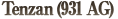
<style>
.page{position:relative;width:118px;height:19px;background:#ffffff}
.page>*{position:absolute;margin:0}
.t1{font:18px "RyuminPro-ExBold";letter-spacing:-0.08em;color:#4a3f32;font-weight:bold;scale:0.9 1}
</style>
<div class="page">
<p class="t1" style="left:1px;top:0px;width:113px;height:19px">Tenzan (931 AG)</p>
</div>
